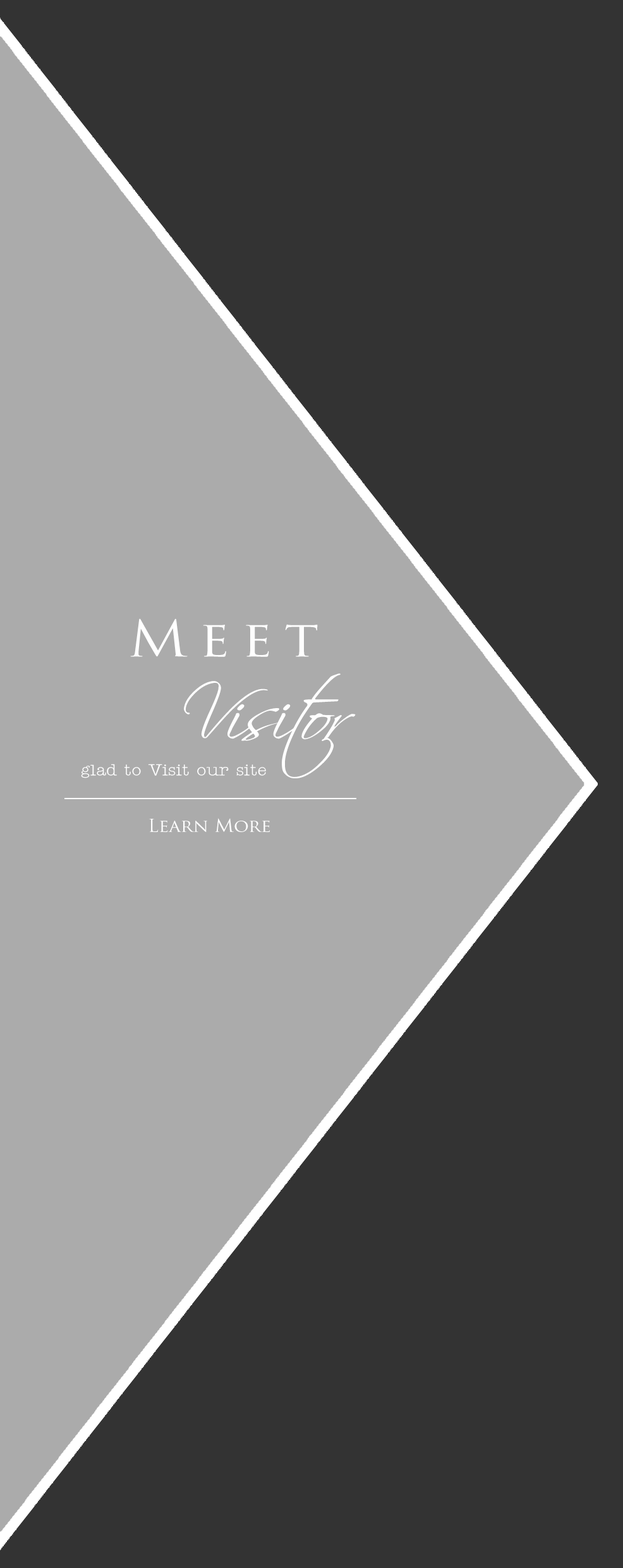
<style>
.page{position:relative;width:623px;height:1568px;background:#333333}
.page>*{position:absolute;margin:0}
.t1{font:49.1px "TrajanPro-Regular";letter-spacing:0.2em;color:#ffffff;scale:1.16 1}
.t2{font:72.6px "Scriptina";color:#ffffff;scale:1.07 1}
.t3{font:16px "Teletype";color:#ffffff;scale:1.07 1}
.t4{font:17.4px "TrajanPro-Regular";color:#ffffff;scale:1.07 1}
</style>
<div class="page">
<p class="t1" style="left:130px;top:618px;width:188px;height:39px">Meet</p>
<p class="t2" style="left:184px;top:673px;width:172px;height:105px">Visitor</p>
<p class="t3" style="left:81px;top:764px;width:185px;height:14px">glad to Visit our site</p>
<p class="t4" style="left:149px;top:818px;width:121px;height:14px">Learn More</p>
</div>
